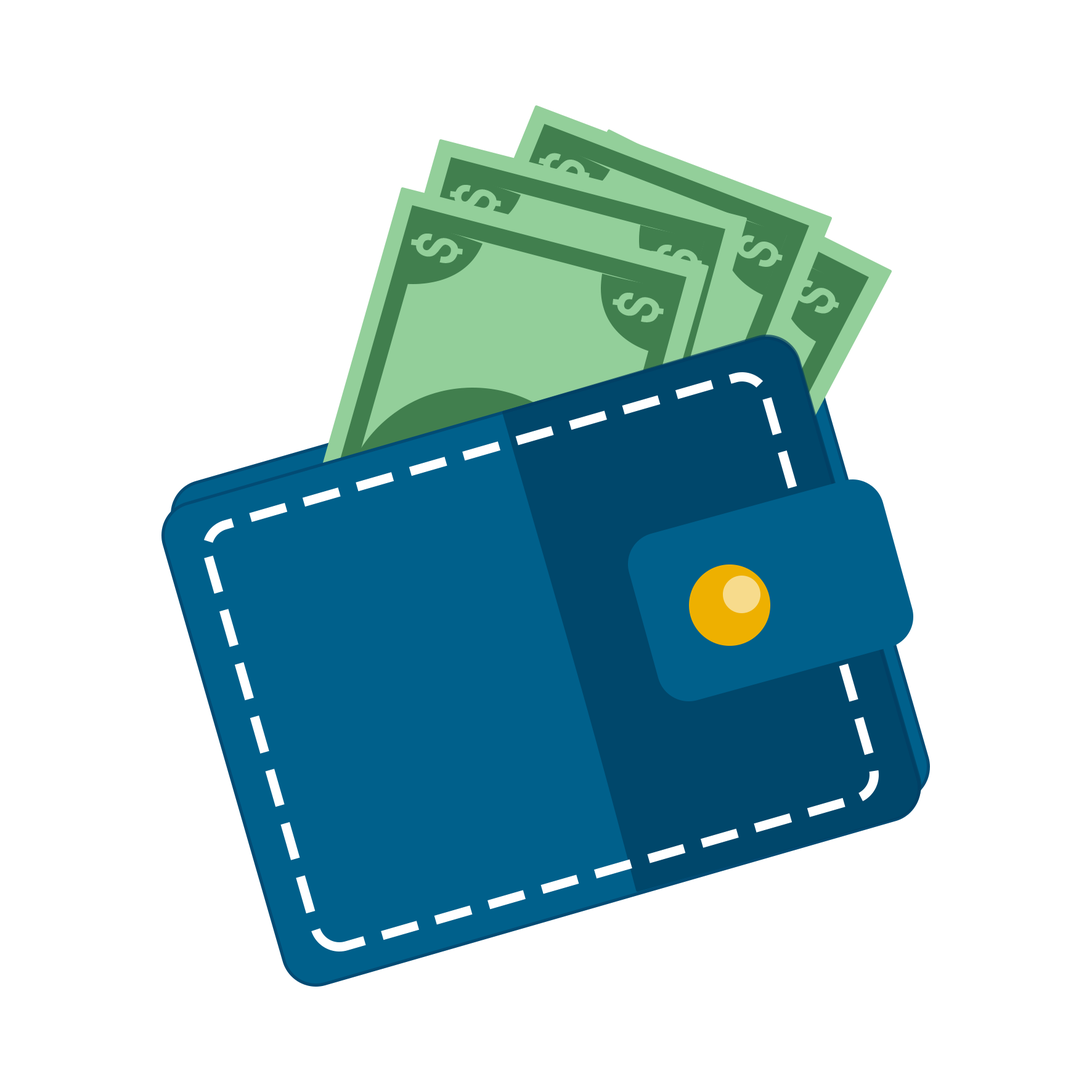
<style>
.page{position:relative;width:1092px;height:1092px;background:#ffffff}
.page>*{position:absolute;margin:0}
.t1{font:57.3px "Arial-BoldMT";color:#93cf9a}
</style>
<div class="page">
<p class="t1" style="left:543px;top:153px;width:42px;height:32px;rotate:-65deg">S</p>
<p class="t1" style="left:454px;top:185px;width:43px;height:29px;rotate:-71deg">S</p>
<p class="t1" style="left:416px;top:234px;width:42px;height:29px;rotate:-71deg">S</p>
<p class="t1" style="left:656px;top:245px;width:42px;height:29px;rotate:-71deg">S</p>
<p class="t1" style="left:736px;top:235px;width:42px;height:32px;rotate:-65deg">S</p>
<p class="t1" style="left:794px;top:280px;width:42px;height:34px;rotate:-59deg">S</p>
<p class="t1" style="left:617px;top:293px;width:42px;height:29px;rotate:-71deg">S</p>
</div>
